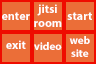
<style>
.page{position:relative;width:96px;height:64px;background:#eb6e38}
.page>*{position:absolute;margin:0}
.t1{font:12px "MyriadPro-Bold";color:#ffffff}
.t2{font:11px "MyriadPro-Bold";color:#ffffff}
</style>
<div class="page">
<p class="t1" style="left:34px;top:4px;width:28px;height:23px;text-align:center">jitsi room</p>
<p class="t1" style="left:2px;top:12px;width:28px;height:8px">enter</p>
<p class="t1" style="left:67px;top:12px;width:25px;height:8px">start</p>
<p class="t1" style="left:6px;top:40px;width:20px;height:9px">exit</p>
<p class="t2" style="left:69px;top:36px;width:21px;height:21px;text-align:center">web<br>site</p>
<p class="t2" style="left:34px;top:42px;width:28px;height:8px">video</p>
</div>
